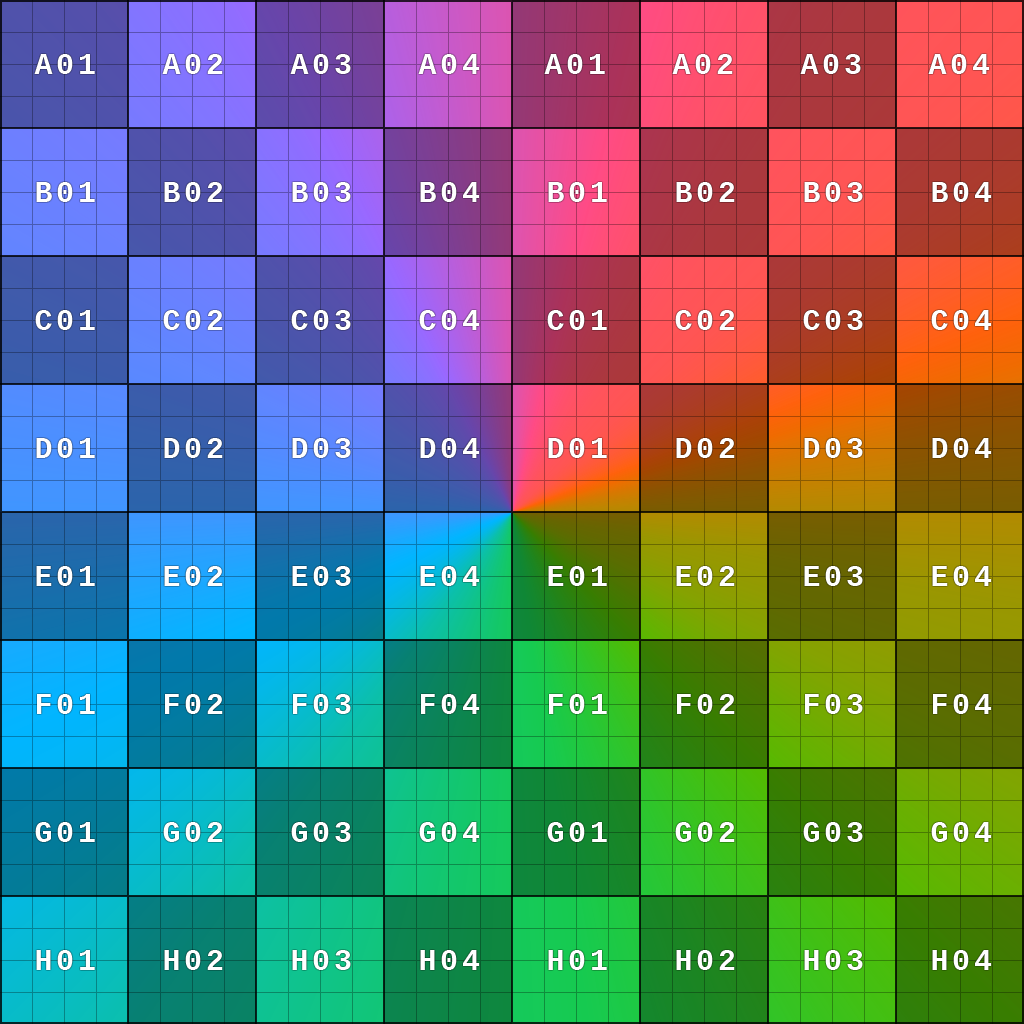
<style>
.page{position:relative;width:1024px;height:1024px}
.page>*{position:absolute;margin:0}
.t1{font:30px "LiberationMono-Bold";letter-spacing:0.12em;color:#ffffff;text-transform:uppercase}
</style>
<div class="page">
<p class="t1" style="left:34px;top:54px;width:61px;height:20px">A01</p>
<p class="t1" style="left:162px;top:54px;width:61px;height:20px">A02</p>
<p class="t1" style="left:290px;top:54px;width:61px;height:20px">A03</p>
<p class="t1" style="left:418px;top:54px;width:62px;height:20px">A04</p>
<p class="t1" style="left:544px;top:54px;width:61px;height:20px">A01</p>
<p class="t1" style="left:672px;top:54px;width:61px;height:20px">A02</p>
<p class="t1" style="left:800px;top:54px;width:61px;height:20px">A03</p>
<p class="t1" style="left:928px;top:54px;width:62px;height:20px">A04</p>
<p class="t1" style="left:36px;top:182px;width:59px;height:20px">b01</p>
<p class="t1" style="left:164px;top:182px;width:59px;height:20px">b02</p>
<p class="t1" style="left:292px;top:182px;width:59px;height:20px">b03</p>
<p class="t1" style="left:420px;top:182px;width:60px;height:20px">b04</p>
<p class="t1" style="left:548px;top:182px;width:59px;height:20px">b01</p>
<p class="t1" style="left:676px;top:182px;width:59px;height:20px">b02</p>
<p class="t1" style="left:804px;top:182px;width:59px;height:20px">b03</p>
<p class="t1" style="left:932px;top:182px;width:60px;height:20px">b04</p>
<p class="t1" style="left:35px;top:310px;width:60px;height:20px">c01</p>
<p class="t1" style="left:163px;top:310px;width:60px;height:20px">c02</p>
<p class="t1" style="left:291px;top:310px;width:60px;height:20px">c03</p>
<p class="t1" style="left:419px;top:310px;width:61px;height:20px">c04</p>
<p class="t1" style="left:547px;top:310px;width:60px;height:20px">c01</p>
<p class="t1" style="left:675px;top:310px;width:60px;height:20px">c02</p>
<p class="t1" style="left:803px;top:310px;width:60px;height:20px">c03</p>
<p class="t1" style="left:931px;top:310px;width:61px;height:20px">c04</p>
<p class="t1" style="left:36px;top:438px;width:59px;height:20px">d01</p>
<p class="t1" style="left:164px;top:438px;width:59px;height:20px">d02</p>
<p class="t1" style="left:292px;top:438px;width:59px;height:20px">d03</p>
<p class="t1" style="left:420px;top:438px;width:60px;height:20px">d04</p>
<p class="t1" style="left:548px;top:438px;width:59px;height:20px">d01</p>
<p class="t1" style="left:676px;top:438px;width:59px;height:20px">d02</p>
<p class="t1" style="left:804px;top:438px;width:59px;height:20px">d03</p>
<p class="t1" style="left:932px;top:438px;width:60px;height:20px">d04</p>
<p class="t1" style="left:36px;top:566px;width:59px;height:20px">E01</p>
<p class="t1" style="left:164px;top:566px;width:59px;height:20px">e02</p>
<p class="t1" style="left:292px;top:566px;width:59px;height:20px">e03</p>
<p class="t1" style="left:420px;top:566px;width:60px;height:20px">e04</p>
<p class="t1" style="left:548px;top:566px;width:59px;height:20px">e01</p>
<p class="t1" style="left:676px;top:566px;width:59px;height:20px">e02</p>
<p class="t1" style="left:804px;top:566px;width:59px;height:20px">e03</p>
<p class="t1" style="left:932px;top:566px;width:60px;height:20px">E04</p>
<p class="t1" style="left:37px;top:694px;width:58px;height:20px">F01</p>
<p class="t1" style="left:165px;top:694px;width:58px;height:20px">F02</p>
<p class="t1" style="left:293px;top:694px;width:58px;height:20px">F03</p>
<p class="t1" style="left:421px;top:694px;width:59px;height:20px">F04</p>
<p class="t1" style="left:549px;top:694px;width:58px;height:20px">F01</p>
<p class="t1" style="left:677px;top:694px;width:58px;height:20px">F02</p>
<p class="t1" style="left:805px;top:694px;width:58px;height:20px">F03</p>
<p class="t1" style="left:933px;top:694px;width:59px;height:20px">F04</p>
<p class="t1" style="left:35px;top:822px;width:60px;height:20px">g01</p>
<p class="t1" style="left:163px;top:822px;width:60px;height:20px">g02</p>
<p class="t1" style="left:291px;top:822px;width:60px;height:20px">g03</p>
<p class="t1" style="left:419px;top:822px;width:61px;height:20px">g04</p>
<p class="t1" style="left:547px;top:822px;width:60px;height:20px">G01</p>
<p class="t1" style="left:675px;top:822px;width:60px;height:20px">G02</p>
<p class="t1" style="left:803px;top:822px;width:60px;height:20px">G03</p>
<p class="t1" style="left:931px;top:822px;width:61px;height:20px">G04</p>
<p class="t1" style="left:36px;top:950px;width:59px;height:20px">h01</p>
<p class="t1" style="left:164px;top:950px;width:59px;height:20px">h02</p>
<p class="t1" style="left:292px;top:950px;width:59px;height:20px">h03</p>
<p class="t1" style="left:420px;top:950px;width:60px;height:20px">h04</p>
<p class="t1" style="left:548px;top:950px;width:59px;height:20px">h01</p>
<p class="t1" style="left:676px;top:950px;width:59px;height:20px">h02</p>
<p class="t1" style="left:804px;top:950px;width:59px;height:20px">h03</p>
<p class="t1" style="left:932px;top:950px;width:60px;height:20px">H04</p>
</div>
